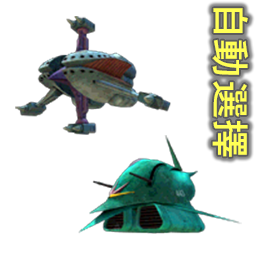
<style>
.page{position:relative;width:256px;height:256px;background:#ffffff}
.page>*{position:absolute;margin:0}
.t1{font:38px "HeiseiKakuGoStd-W5";letter-spacing:0.06em;color:#ffff55;scale:1.04 1}
</style>
<div class="page">
<p class="t1" style="left:212px;top:8px;width:36px;height:149px;rotate:90deg">自動選擇</p>
</div>
